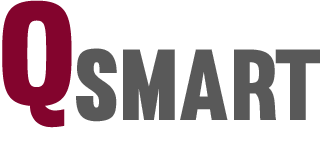
<style>
.page{position:relative;width:322px;height:150px;background:#ffffff}
.page>*{position:absolute;margin:0}
.t1{font:142.4px "Muro-Regular";color:#83042d}
.t2{font:98.6px "Muro-Regular";color:#595959}
</style>
<div class="page">
<p class="t1" style="left:2px;top:0px;width:70px;height:128px">q</p>
<p class="t2" style="left:76px;top:48px;width:244px;height:74px">smart</p>
</div>
